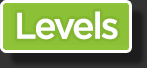
<style>
.page{position:relative;width:147px;height:68px}
.page>*{position:absolute;margin:0}
.t1{font:37px "iCielGotham-Medium";letter-spacing:-0.06em;color:#ffffff}
</style>
<div class="page">
<p class="t1" style="left:17px;top:11px;width:101px;height:29px">Levels</p>
</div>
